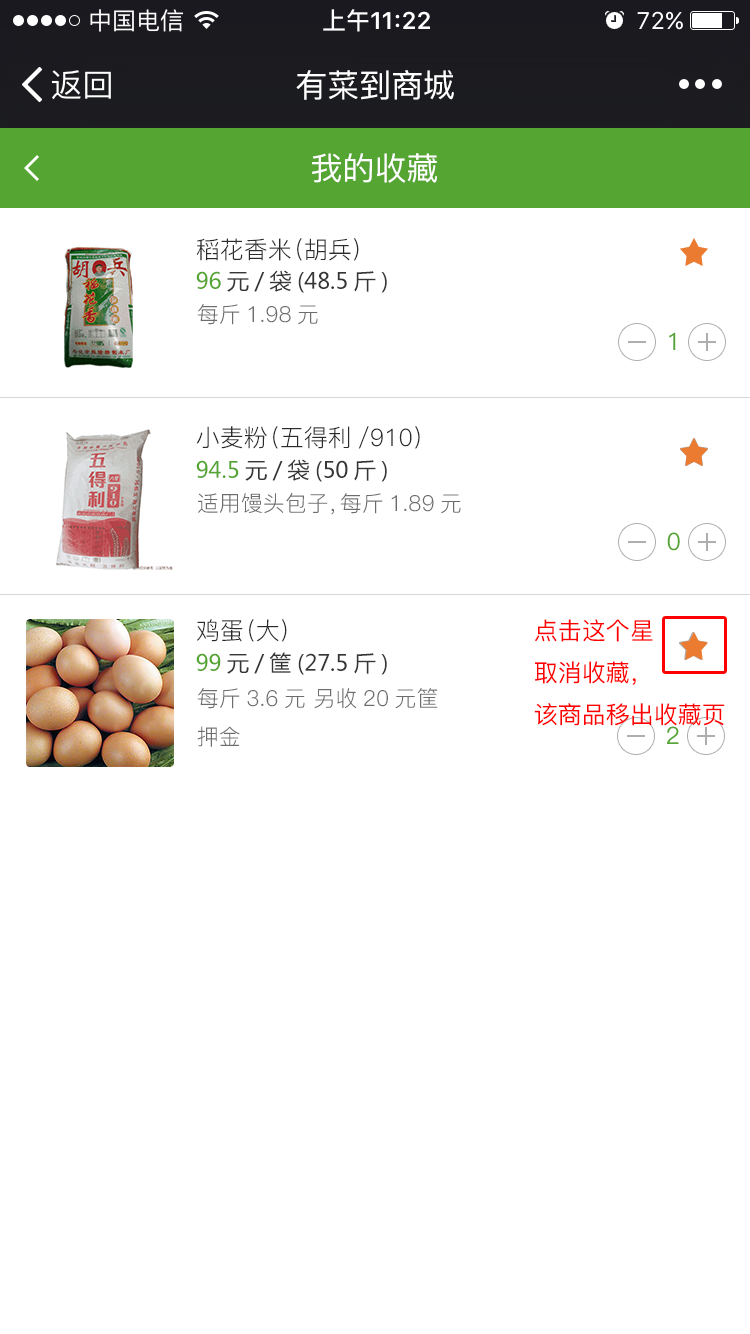
<style>
.page{position:relative;width:750px;height:1334px;background:#ffffff}
.page>*{position:absolute;margin:0}
.t1{font:32px "PingFang-SC-Medium";color:#ffffff}
.t2{font:24px "PingFang-SC-Regular";color:#2b2b2b}
.t3{font:22px "MicrosoftYaHei";color:#363636}
.t4{font:22px "MicrosoftYaHei";color:#55a533}
.t5{font:22px "PingFang-SC-Regular";color:#6d6d6d}
.t6{font:24px "PingFang-SC-Medium";color:#55a533}
.t7{font:24px "PingFang-SC-Medium";color:#ff0000}
</style>
<div class="page">
<p class="t1" style="left:296px;top:70px;width:158px;height:30px">有菜到商城</p>
<p class="t1" style="left:312px;top:153px;width:125px;height:30px">我的收藏</p>
<p class="t2" style="left:196px;top:238px;width:163px;height:23px">稻花香米（胡兵）</p>
<p class="t3" style="left:196px;top:270px;width:191px;height:23px"><span class="t4">96</span>元/袋(48.5斤)</p>
<p class="t5" style="left:197px;top:304px;width:121px;height:21px">每斤1.98元</p>
<p class="t6" style="left:669px;top:332px;width:7px;height:18px">1</p>
<p class="t2" style="left:196px;top:426px;width:224px;height:23px">小麦粉（五得利/910）</p>
<p class="t3" style="left:196px;top:459px;width:191px;height:23px"><span class="t4">94.5</span>元/袋(50斤)</p>
<p class="t5" style="left:198px;top:492px;width:263px;height:23px">适用馒头包子，每斤1.89元</p>
<p class="t6" style="left:667px;top:532px;width:13px;height:19px">0</p>
<p class="t2" style="left:197px;top:619px;width:90px;height:23px">鸡蛋（大）</p>
<p class="t7" style="left:534px;top:619px;width:191px;height:107px">点击这个星<br>取消收藏，<br>该商品移出收藏页</p>
<p class="t3" style="left:196px;top:652px;width:191px;height:23px"><span class="t4">99</span>元/筐(27.5斤)</p>
<p class="t5" style="left:197px;top:688px;width:241px;height:59px">每斤3.6元 另收20元筐<br>押金</p>
<p class="t6" style="left:667px;top:726px;width:12px;height:18px">2</p>
</div>
